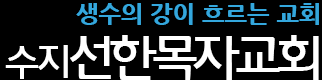
<style>
.page{position:relative;width:322px;height:80px;background:#000000}
.page>*{position:absolute;margin:0}
.t1{font:24px "NanumGothicExtraBold";color:#34a7dd}
.t2{font:48px "Daum_Regular";letter-spacing:-0.13em;color:#ffffff}
.t3{font:36px "Daum_Regular";letter-spacing:-0.13em;color:#ffffff}
</style>
<div class="page">
<p class="t1" style="left:76px;top:3px;width:243px;height:22px">생수의 강이 흐르는 교회</p>
<p class="t2" style="left:5px;top:35px;width:314px;height:45px"><span class="t3">수지</span>선한목자교회</p>
</div>
